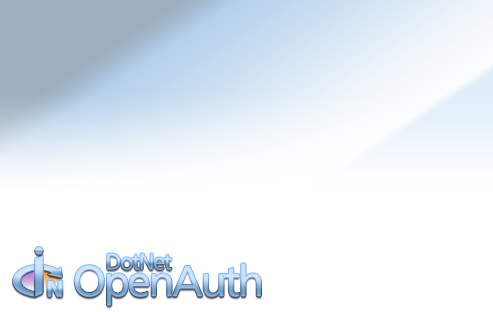
<style>
.page{position:relative;width:493px;height:312px;background:#ffffff}
.page>*{position:absolute;margin:0}
.t1{font:43.6px "FrutigerLT-Roman";letter-spacing:-0.07em}
.t2{font:23.1px "FrutigerLT-Black";letter-spacing:-0.085em}
</style>
<div class="page">
<p class="t1" style="left:74px;top:263px;width:187px;height:43px">OpenAuth</p>
<p class="t2" style="left:47px;top:280px;width:16px;height:17px">N</p>
</div>
